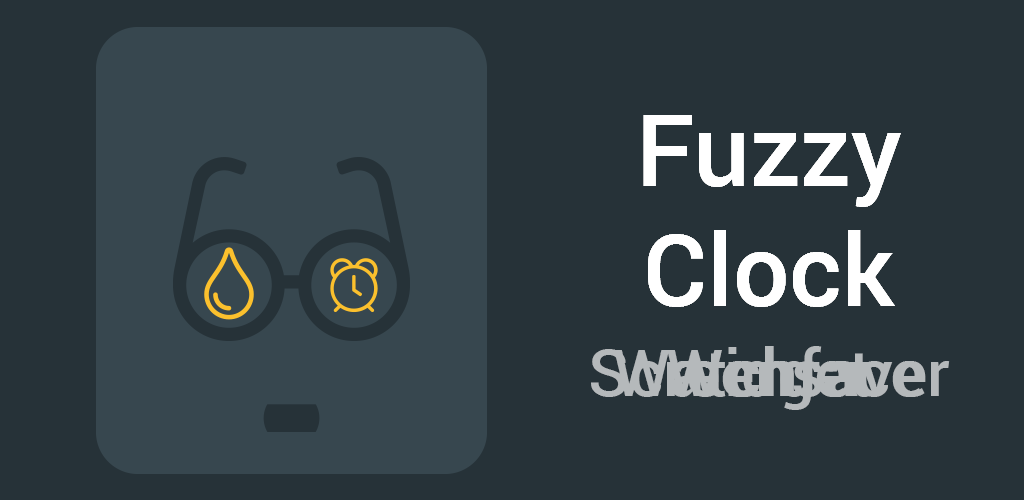
<style>
.page{position:relative;width:1024px;height:500px;background:#263238}
.page>*{position:absolute;margin:0}
.t1{font:65px/90px "Roboto-Medium";color:#b5b9bb}
.t2{font:100px "Roboto-Medium";color:#ffffff}
.t3{font:100px/90px "Roboto-Medium";color:#ffffff}
</style>
<div class="page">
<p class="t1" style="left:591px;top:115px;width:359px;height:282px;text-align:center"><span class="t2">Fuzzy<br>Clo</span><span class="t3">ck<br></span>Screensaver</p>
<p class="t2" style="left:614px;top:115px;width:309px;height:282px;text-align:center">Fuzzy<br>Clo<span class="t3">ck<br></span><span class="t1">Watchface</span></p>
<p class="t2" style="left:643px;top:115px;width:258px;height:295px;text-align:center">Fuzzy<br>Clo<span class="t3">ck<br></span><span class="t1">Widget</span></p>
</div>
